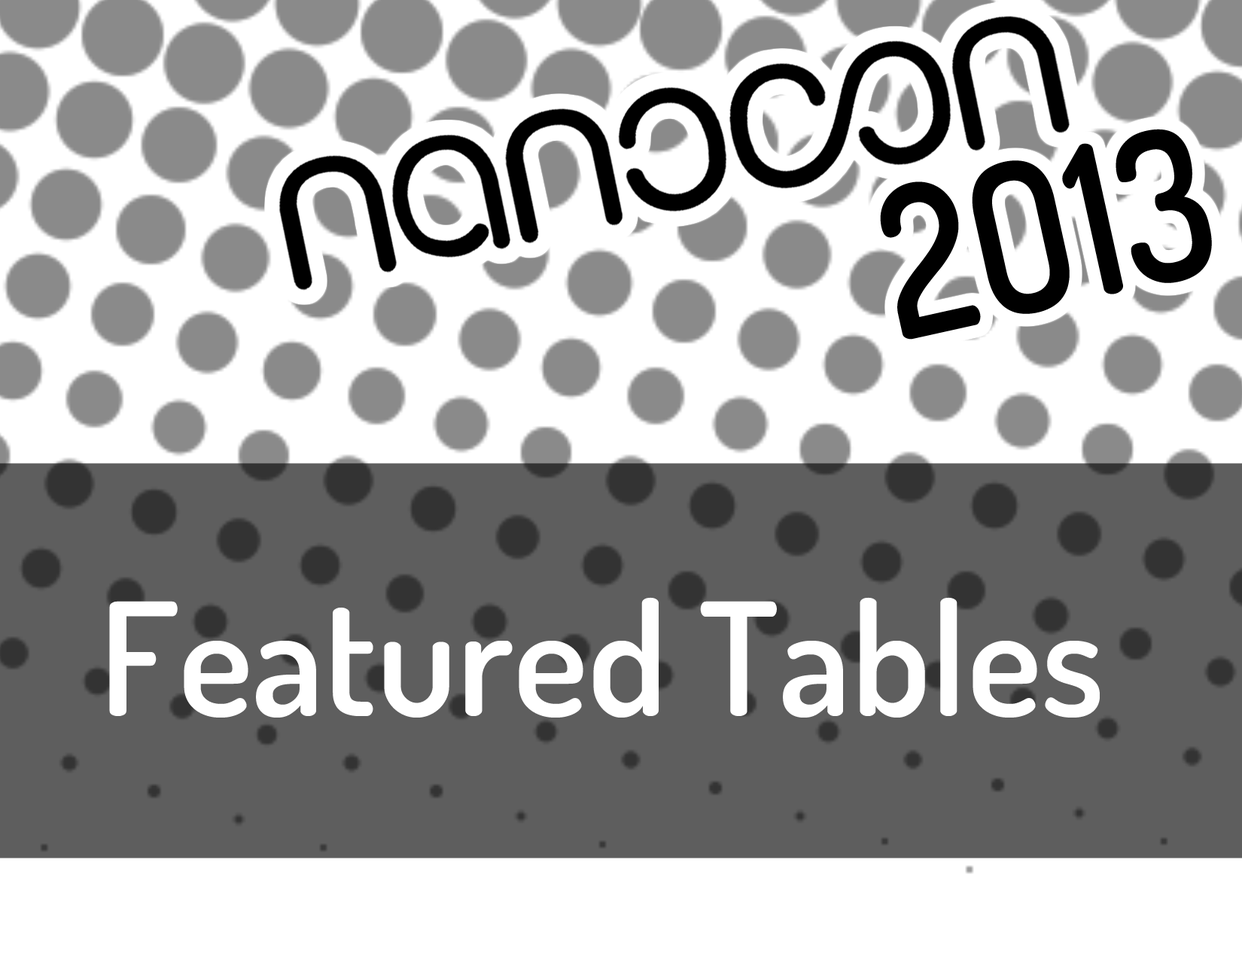
<style>
.page{position:relative;width:1242px;height:960px;background:#ffffff}
.page>*{position:absolute;margin:0}
.t1{font:209.2px "Dosis-SemiBold";color:#000000;scale:0.87 1}
.t2{font:156.8px "Dosis-SemiBold";color:#ffffff}
</style>
<div class="page">
<p class="t1" style="left:880px;top:129px;width:332px;height:211px;rotate:-12deg">2O13</p>
<p class="t2" style="left:109px;top:597px;width:991px;height:120px">Featured Tables</p>
</div>
